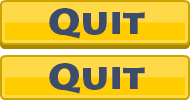
<style>
.page{position:relative;width:190px;height:100px;background:#ffd948}
.page>*{position:absolute;margin:0}
.t1{font:36px "LithosPro-Black";color:#3d4c6b}
</style>
<div class="page">
<p class="t1" style="left:49px;top:8px;width:96px;height:31px">Quit</p>
<p class="t1" style="left:49px;top:63px;width:96px;height:31px">Quit</p>
</div>
